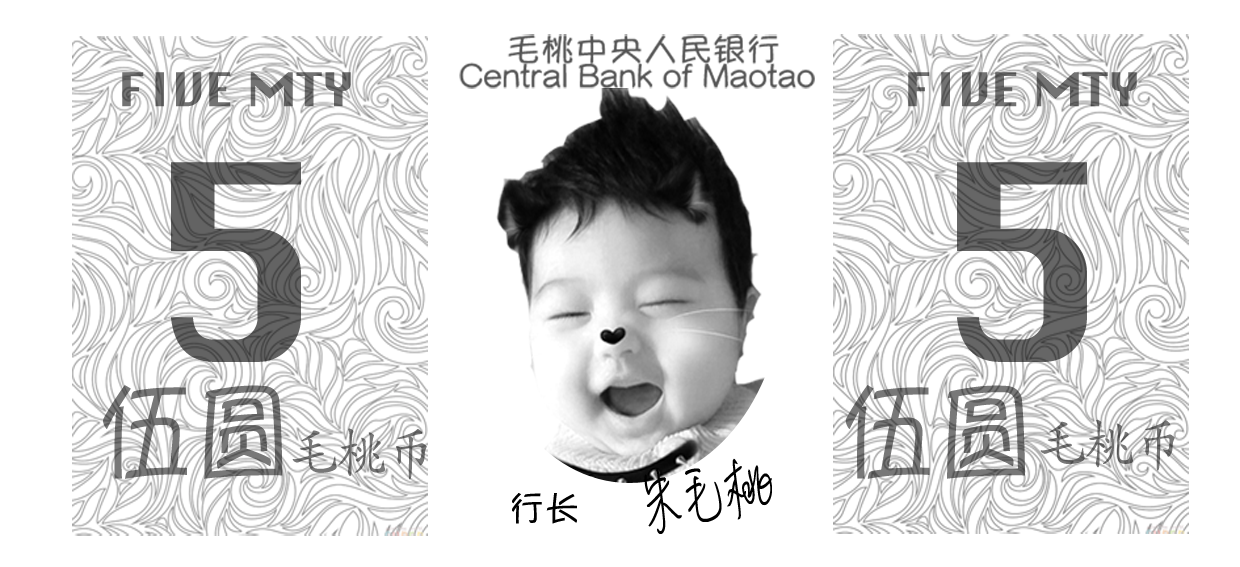
<style>
.page{position:relative;width:1240px;height:567px;background:#ffffff}
.page>*{position:absolute;margin:0}
.t1{font:45.1px "Silom";color:#6b6b6b;scale:1.1 1}
.t2{font:45.1px "Silom";color:#6a6a6a;scale:1.1 1}
.t3{font:265.8px "Silom";color:#5f5f5f}
.t4{font:265.8px "Silom";color:#626262}
.t5{font:109px "YuppySC-Regular";color:#727272;scale:0.9 1}
.t6{font:54.5px "STKaiti";color:#6d6d6d;scale:0.9 1}
.t7{font:54.5px "STKaiti";color:#717171;scale:0.9 1}
.t8{font:85.3px "MLingWaiMedium-SC";color:#000000;scale:0.67 1}
.t9{font:35.5px "YuppySC-Regular";color:#000000}
</style>
<div class="page">
<p class="t1" style="left:122px;top:72px;width:229px;height:35px">FIVE MTY</p>
<p class="t2" style="left:908px;top:72px;width:229px;height:35px">FIVE MTY</p>
<p class="t3" style="left:171px;top:162px;width:130px;height:200px">5</p>
<p class="t4" style="left:957px;top:162px;width:130px;height:200px">5</p>
<p class="t5" style="left:103px;top:385px;width:180px;height:94px">伍圆</p>
<p class="t5" style="left:845px;top:385px;width:180px;height:94px">伍圆</p>
<p class="t6" style="left:1040px;top:419px;width:135px;height:52px">毛桃币</p>
<p class="t7" style="left:292px;top:428px;width:135px;height:52px">毛桃币</p>
<p class="t8" style="left:644px;top:458px;width:128px;height:76px;rotate:-9deg">朱毛桃</p>
<p class="t9" style="left:512px;top:493px;width:65px;height:31px">行长</p>
</div>
